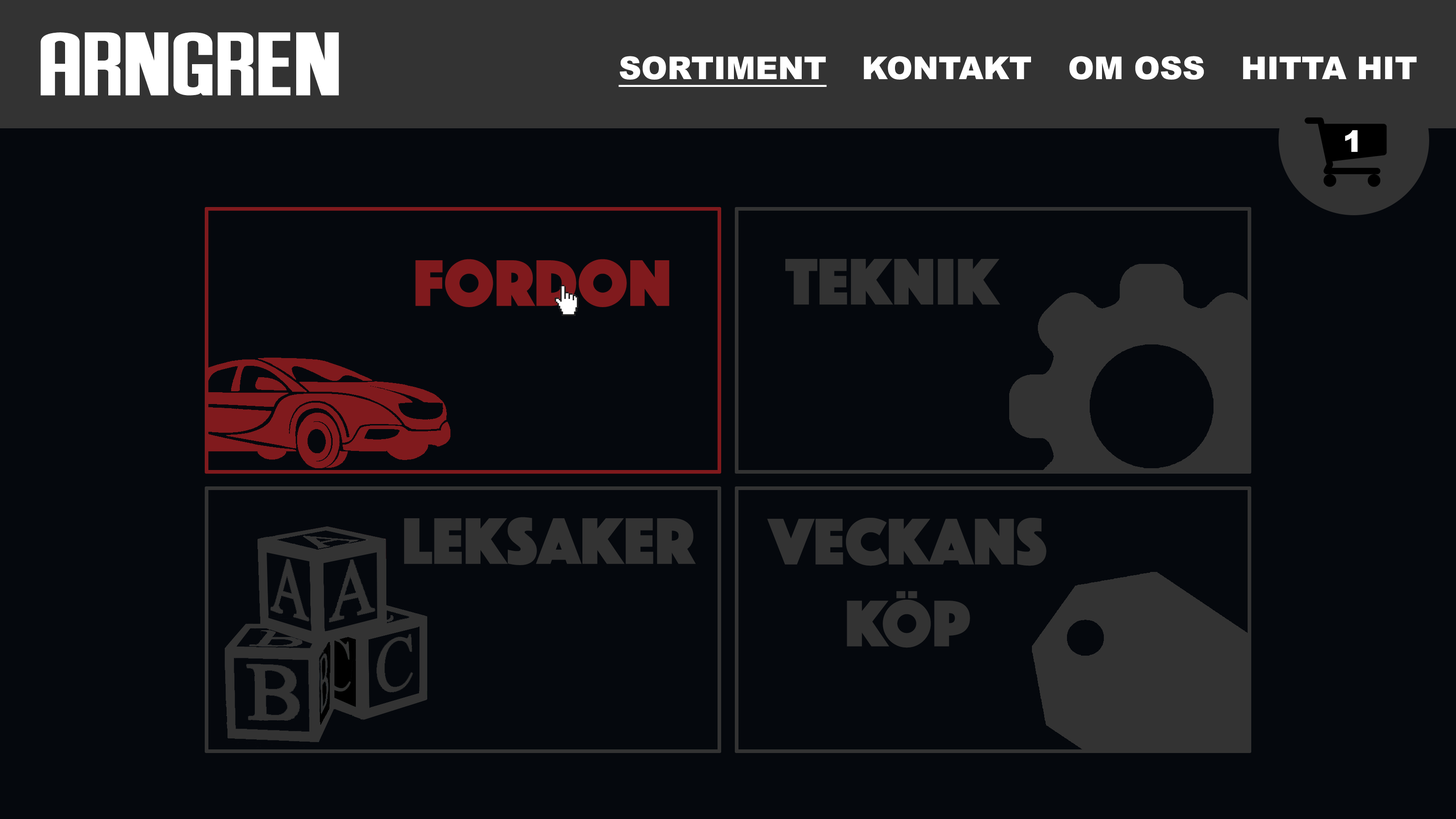
<style>
.page{position:relative;width:1456px;height:819px;background:#05080d}
.page>*{position:absolute;margin:0}
.t1{font:89.6px "AndersonSupercar";color:#ffffff;scale:1.55 1}
.t2{font:31.4px "Arial-Black";color:#ffffff;text-decoration:underline}
.t3{font:31.4px "Arial-Black";color:#ffffff}
.t4{font:29.6px "Arial-Black";color:#ffffff}
.t5{font:68.2px "Phosphate-Solid";color:#801a1d}
.t6{font:68.2px "Phosphate-Solid";color:#333333}
</style>
<div class="page">
<p class="t1" style="left:40px;top:32px;width:299px;height:64px">ARNGREN</p>
<p class="t2" style="left:618px;top:56px;width:209px;height:31px">SORTIMENT</p>
<p class="t3" style="left:864px;top:56px;width:167px;height:24px">KONTAKT</p>
<p class="t3" style="left:1069px;top:56px;width:135px;height:24px">OM OSS</p>
<p class="t3" style="left:1243px;top:56px;width:174px;height:23px">HITTA HIT</p>
<p class="t4" style="left:1345px;top:130px;width:13px;height:22px">1</p>
<p class="t5" style="left:415px;top:259px;width:254px;height:48px">Fordon</p>
<p class="t6" style="left:785px;top:259px;width:215px;height:46px">Teknik</p>
<p class="t6" style="left:404px;top:517px;width:292px;height:48px">Leksaker</p>
<p class="t6" style="left:767px;top:518px;width:279px;height:130px;text-align:center">veckans<br>köp</p>
</div>
